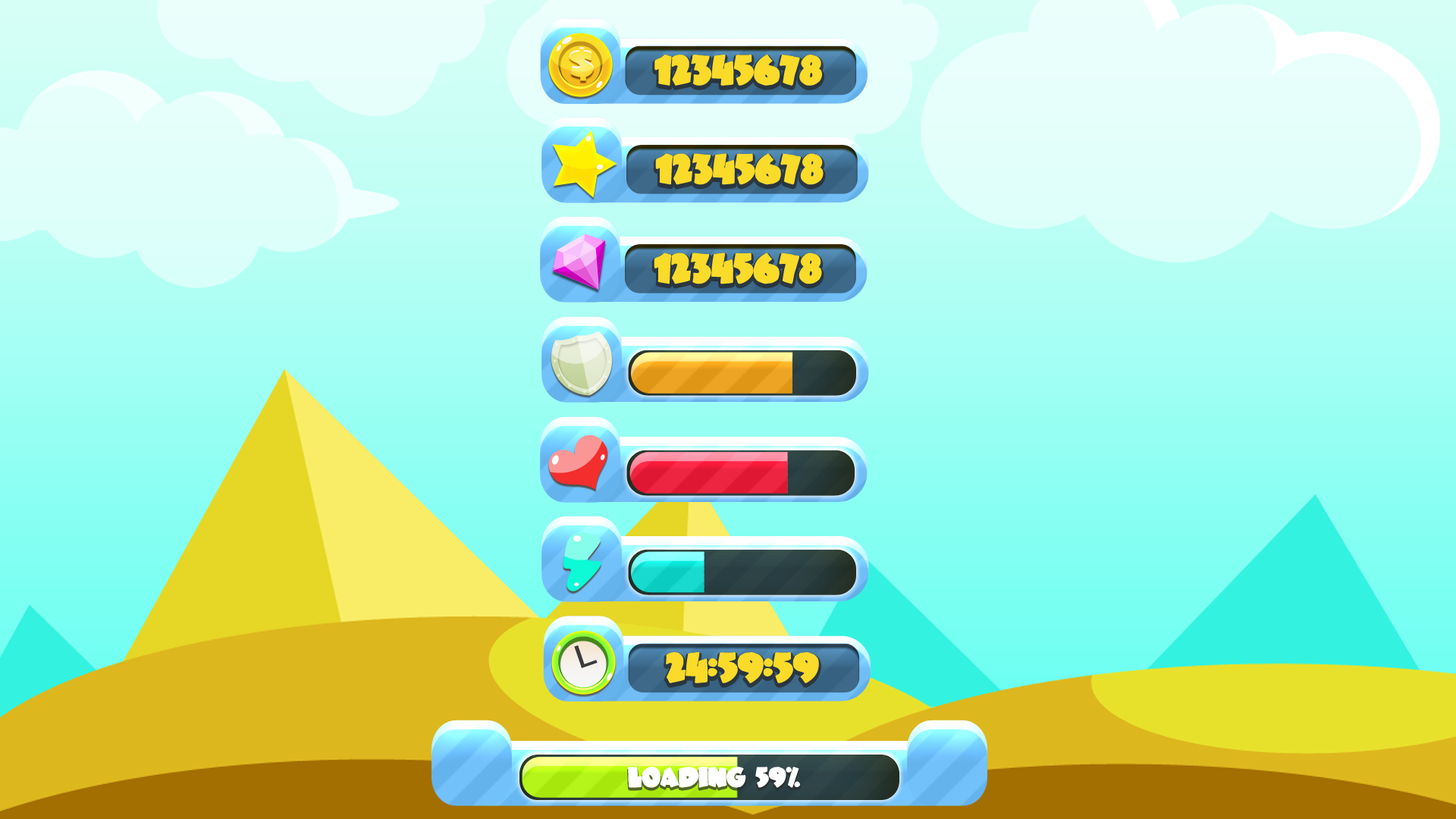
<style>
.page{position:relative;width:1456px;height:819px}
.page>*{position:absolute;margin:0}
.t1{font:42.7px "JuneBug";letter-spacing:-0.02em;scale:1.04 1}
.t2{font:30.9px "JuneBug";letter-spacing:-0.02em;color:#fadb2a}
.t3{font:30.9px "JuneBug";letter-spacing:-0.02em;color:#ffffff}
.t4{font:20.6px "JuneBug";letter-spacing:-0.02em;color:#ffffff}
</style>
<div class="page">
<p class="t1" style="left:569px;top:47px;width:25px;height:34px">$</p>
<p class="t2" style="left:654px;top:55px;width:168px;height:31px">12345678<span class="t3">90</span></p>
<p class="t2" style="left:655px;top:153px;width:169px;height:32px">12345678<span class="t3">90</span></p>
<p class="t2" style="left:654px;top:253px;width:168px;height:31px">12345678<span class="t3">90</span></p>
<p class="t2" style="left:666px;top:652px;width:153px;height:31px">24:59:59</p>
<p class="t4" style="left:628px;top:767px;width:172px;height:21px">LOADING 59%</p>
</div>
